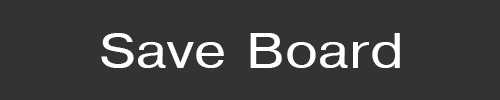
<style>
.page{position:relative;width:500px;height:100px;background:#333333}
.page>*{position:absolute;margin:0}
.t1{font:48px "Helvetica";color:#ffffff;scale:1.2 1}
</style>
<div class="page">
<p class="t1" style="left:101px;top:33px;width:299px;height:35px">Save Board</p>
</div>
